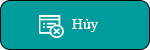
<style>
.page{position:relative;width:150px;height:50px;background:#009b9b}
.page>*{position:absolute;margin:0}
.t1{font:15.3px "TimesNewRomanPSMT";color:#fefefe}
</style>
<div class="page">
<p class="t1" style="left:72px;top:19px;width:26px;height:13px">Hủy</p>
</div>
